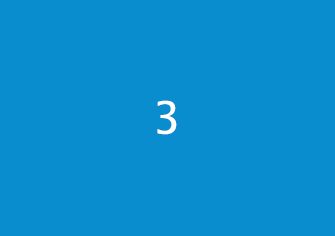
<style>
.page{position:relative;width:335px;height:236px;background:#098dce}
.page>*{position:absolute;margin:0}
.t1{font:44px "LucidaGrande";letter-spacing:0.01em;color:#ffffff}
</style>
<div class="page">
<p class="t1" style="left:157px;top:100px;width:20px;height:35px">3</p>
</div>
